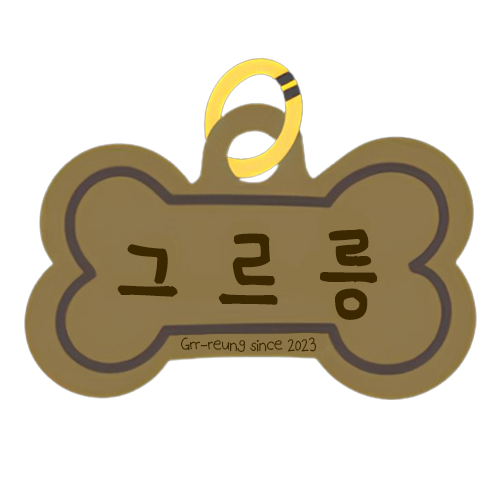
<style>
.page{position:relative;width:500px;height:500px;background:#ffffff}
.page>*{position:absolute;margin:0}
.t1{font:105.5px "UhBeepudingBold";color:#3b2800}
.t2{font:13.7px "UhBeeBEOJJIBold";color:#3b2800}
</style>
<div class="page">
<p class="t1" style="left:117px;top:229px;width:260px;height:91px;rotate:3deg">그 르 릉</p>
<p class="t2" style="left:181px;top:337px;width:135px;height:15px">Grr-reung since 2023</p>
</div>
